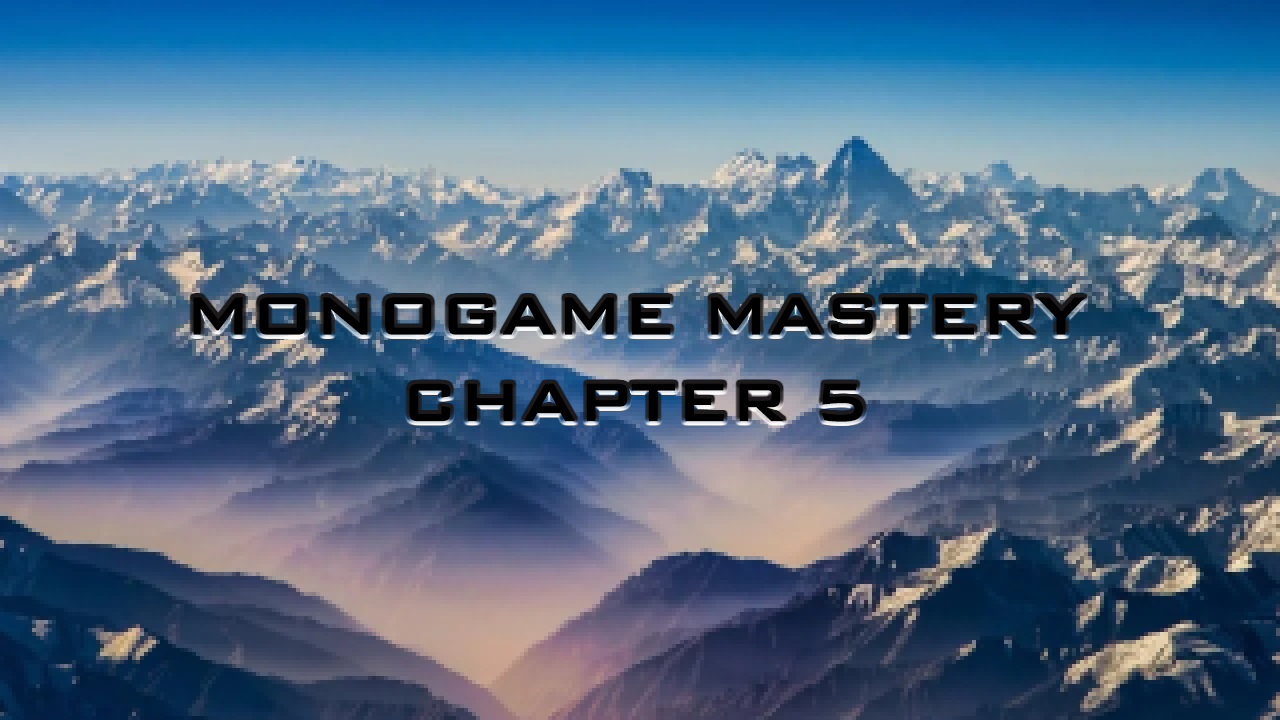
<style>
.page{position:relative;width:1280px;height:720px}
.page>*{position:absolute;margin:0}
.t1{font:72px "BankGothicBT-Medium";color:#000000}
</style>
<div class="page">
<p class="t1" style="left:193px;top:297px;width:892px;height:125px;text-align:center">MONOGAME MASTERY<br>CHAPTER 5</p>
</div>
